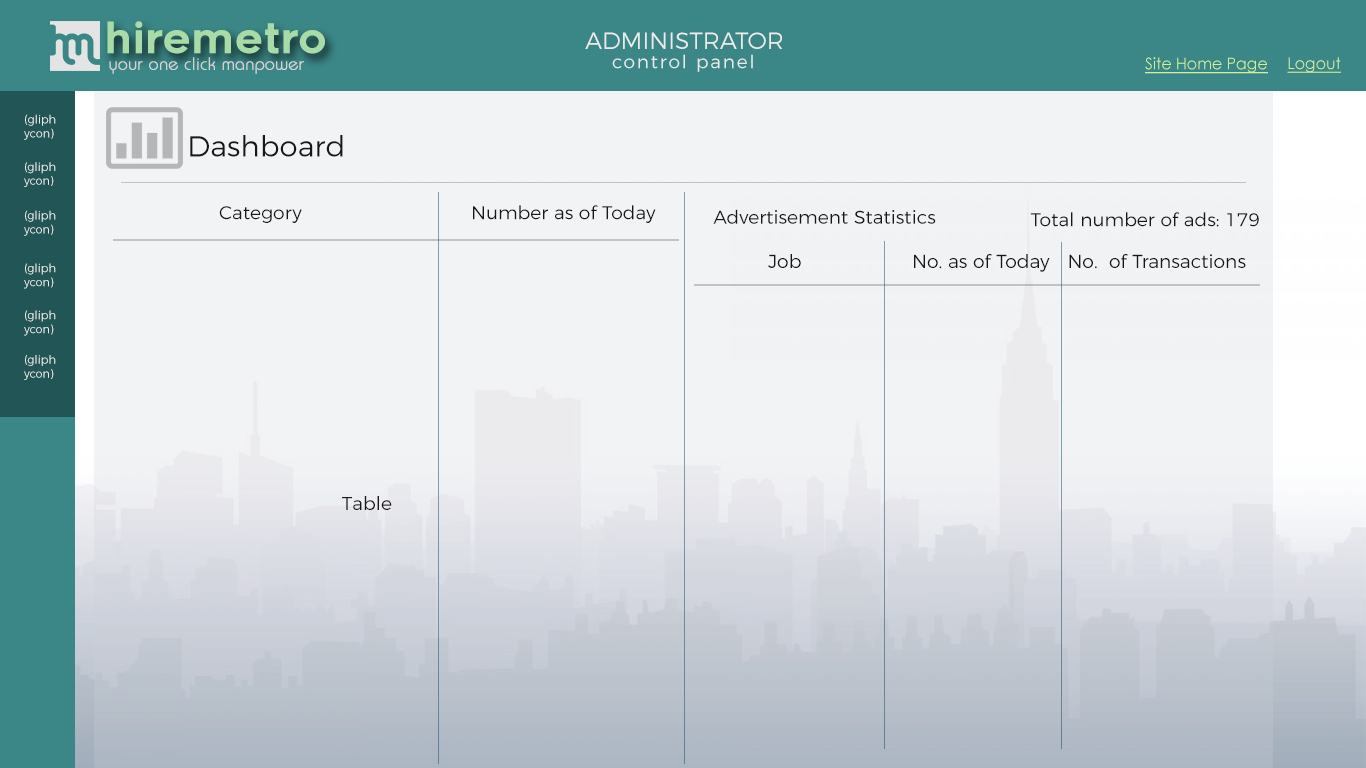
<style>
.page{position:relative;width:1366px;height:768px;background:#f2f3f5}
.page>*{position:absolute;margin:0}
.t1{font:42.1px "Renogare-Regular";color:#a8dba8}
.t2{font:23.6px "Montserrat-Light";color:#ebebeb}
.t3{font:18.4px "Montserrat-Light";letter-spacing:0.1em;color:#ebebeb}
.t4{font:17.5px "Brie-Light";color:#d5d5d5;font-weight:bold}
.t5{font:16.1px "CenturyGothic";color:#cff09e;text-decoration:underline}
.t6{font:11.5px "Montserrat-Light";color:#ebebeb}
.t7{font:28.9px "Montserrat-Light";color:#171717}
.t8{font:18.8px "Montserrat-Light";color:#171717}
.t9{font:18.9px "Montserrat-Light";color:#171717}
</style>
<div class="page">
<p class="t1" style="left:107px;top:21px;width:218px;height:33px">hiremetro</p>
<p class="t2" style="left:585px;top:32px;width:198px;height:17px">ADMINISTRATOR</p>
<p class="t3" style="left:612px;top:54px;width:141px;height:18px">control panel</p>
<p class="t4" style="left:109px;top:57px;width:195px;height:17px">your one click manpower</p>
<p class="t5" style="left:1145px;top:57px;width:123px;height:17px">Site Home Page</p>
<p class="t5" style="left:1287px;top:57px;width:54px;height:16px">Logout</p>
<p class="t6" style="left:24px;top:114px;width:32px;height:26px">(gliph<br>ycon)</p>
<p class="t7" style="left:190px;top:135px;width:153px;height:22px">Dashboard</p>
<p class="t6" style="left:24px;top:162px;width:32px;height:25px">(gliph<br>ycon)</p>
<p class="t8" style="left:219px;top:205px;width:437px;height:18px">Category                    Number as of Today</p>
<p class="t8" style="left:713px;top:209px;width:223px;height:15px">Advertisement Statistics</p>
<p class="t6" style="left:24px;top:210px;width:32px;height:26px">(gliph<br>ycon)</p>
<p class="t8" style="left:1030px;top:212px;width:229px;height:15px">Total number of ads: 179</p>
<p class="t9" style="left:768px;top:254px;width:478px;height:18px">Job    No. as of Today   No.  of Transactions</p>
<p class="t6" style="left:24px;top:263px;width:32px;height:26px">(gliph<br>ycon)</p>
<p class="t6" style="left:24px;top:310px;width:32px;height:26px">(gliph<br>ycon)</p>
<p class="t6" style="left:24px;top:355px;width:32px;height:25px">(gliph<br>ycon)</p>
<p class="t8" style="left:342px;top:496px;width:50px;height:14px">Table</p>
</div>
